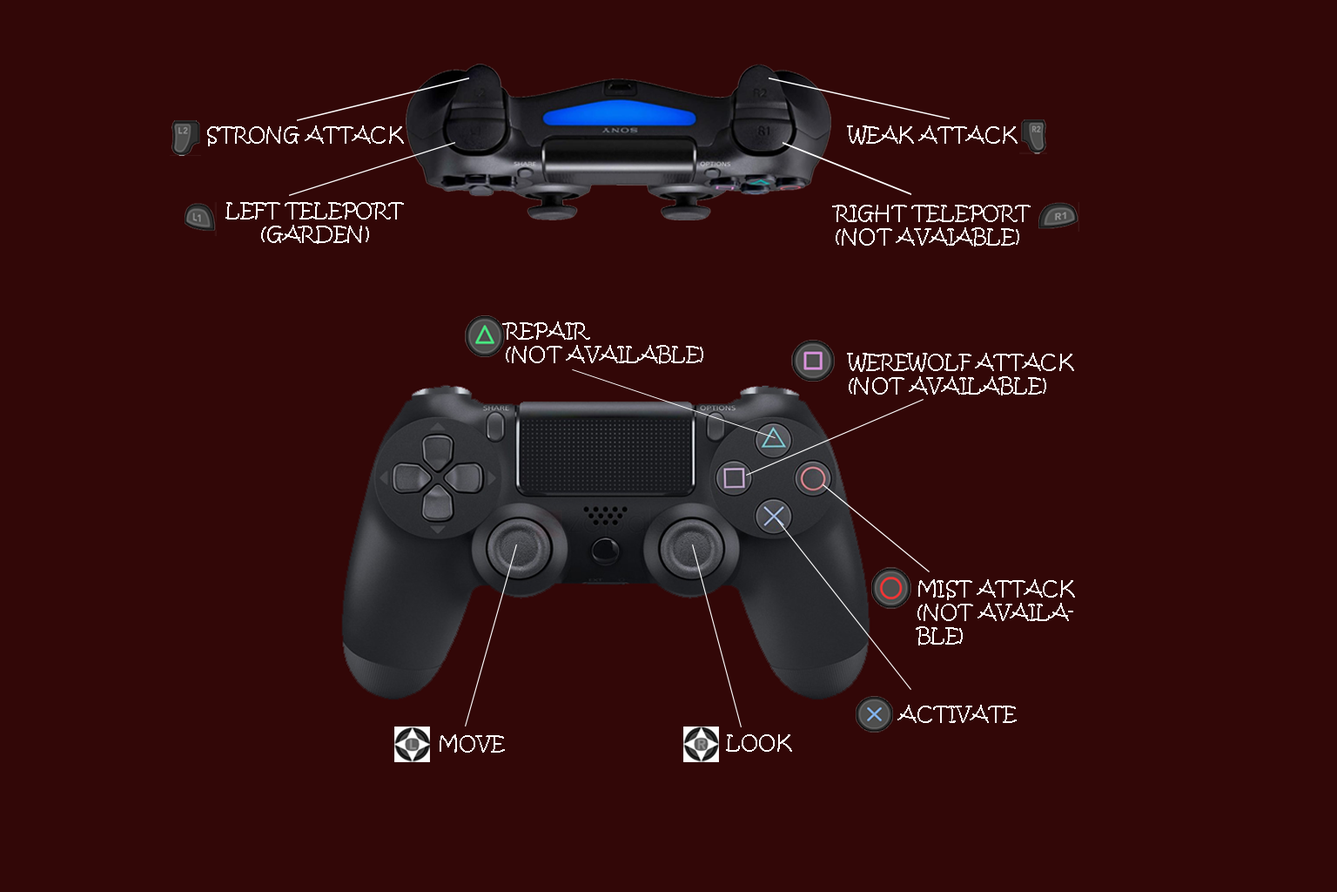
<style>
.page{position:relative;width:1337px;height:892px;background:#320707}
.page>*{position:absolute;margin:0}
.t1{font:19.6px "KristenITC-Regular";color:#fdfafa}
</style>
<div class="page">
<p class="t1" style="left:207px;top:125px;width:197px;height:21px">STRONG ATTACK</p>
<p class="t1" style="left:847px;top:125px;width:171px;height:20px">WEAK ATTACK</p>
<p class="t1" style="left:226px;top:202px;width:178px;height:42px">LEFT TELEPORT<br>      (GARDEN)</p>
<p class="t1" style="left:832px;top:205px;width:199px;height:41px">RIGHT TELEPORT<br>(NOT AVAIABLE)</p>
<p class="t1" style="left:502px;top:321px;width:202px;height:43px">REPAIR <br>(NOT AVAILABLE)</p>
<p class="t1" style="left:847px;top:353px;width:227px;height:42px">WEREWOLF ATTACK<br>(NOT AVAILABLE)</p>
<p class="t1" style="left:916px;top:579px;width:159px;height:66px">MIST ATTACK (NOT AVAILABLE)</p>
<p class="t1" style="left:898px;top:704px;width:119px;height:19px">ACTIVATE</p>
<p class="t1" style="left:440px;top:734px;width:65px;height:18px">MOVE</p>
<p class="t1" style="left:726px;top:734px;width:66px;height:17px">LOOK</p>
</div>
